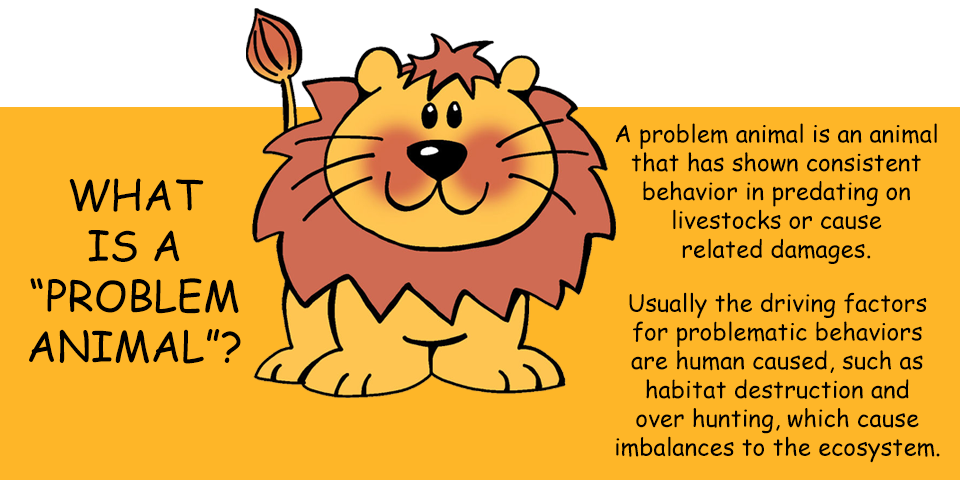
<style>
.page{position:relative;width:960px;height:480px;background:#feb628}
.page>*{position:absolute;margin:0}
.t1{font:24px "ComicSansMS";color:#000000}
.t2{font:42px "ComicSansMS";color:#000000}
</style>
<div class="page">
<p class="t1" style="left:615px;top:123px;width:322px;height:141px;text-align:center">A problem animal is an animal<br>that has shown consistent<br>behavior in predating on<br>livestocks or cause<br>related damages.</p>
<p class="t2" style="left:29px;top:178px;width:212px;height:186px;text-align:center">WHAT<br>IS A<br>“PROBLEM<br>ANIMAL”?</p>
<p class="t1" style="left:616px;top:292px;width:324px;height:171px;text-align:center">Usually the driving factors<br>for problematic behaviors<br>are human caused, such as<br>habitat destruction and<br>over hunting, which cause<br>imbalances to the ecosystem.</p>
</div>
